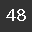
<style>
.page{position:relative;width:32px;height:32px;background:#333333}
.page>*{position:absolute;margin:0}
.t1{font:17.8px "MyriadPro-Regular";color:#ffffff;scale:1.12 1}
</style>
<div class="page">
<p class="t1" style="left:6px;top:9px;width:20px;height:12px">48</p>
</div>
